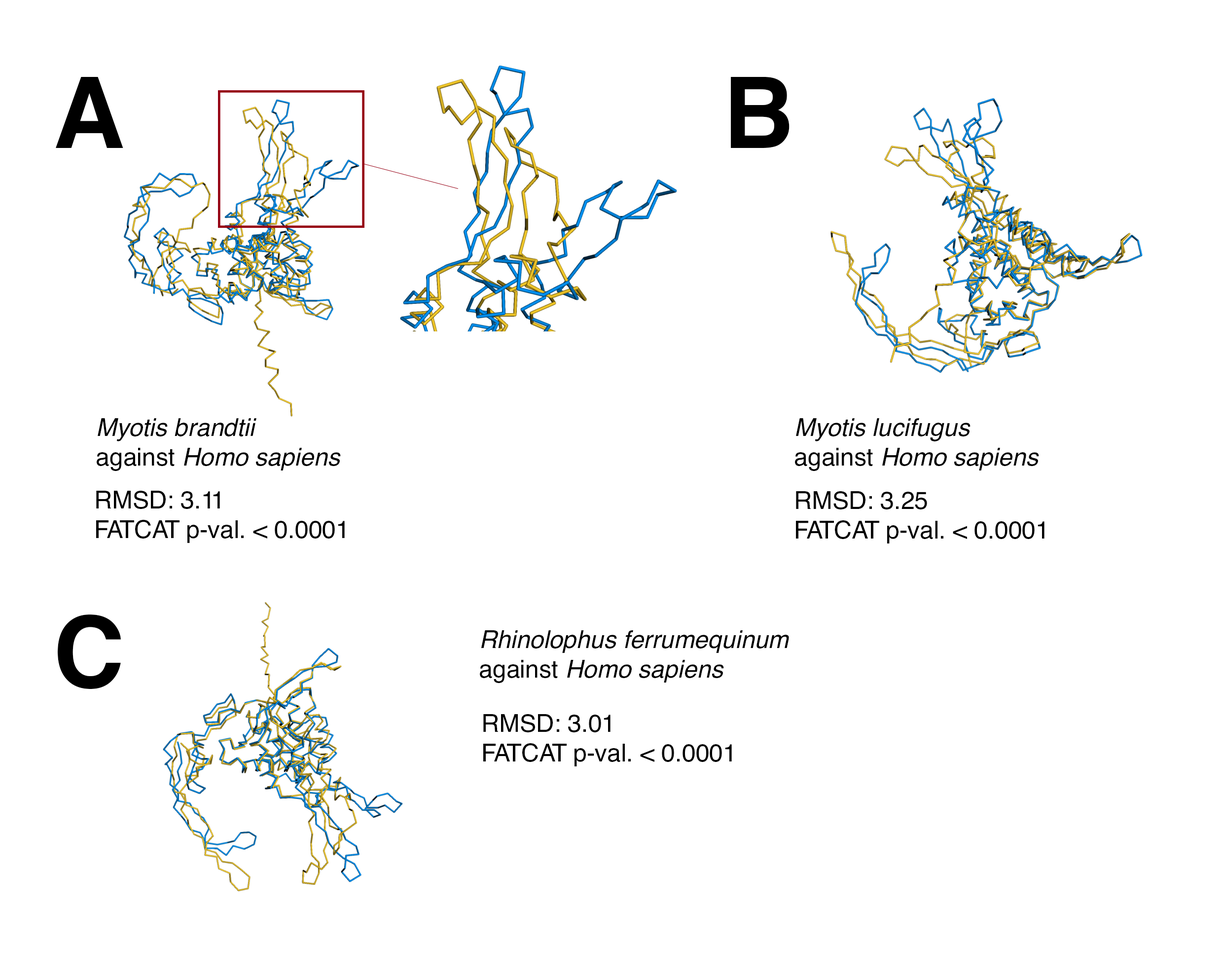
<style>
.page{position:relative;width:1223px;height:975px;background:#ffffff}
.page>*{position:absolute;margin:0}
.t1{font:98.6px "Helvetica-Bold";color:#000000}
.t2{font:24.7px "Helvetica-Oblique";color:#000000}
.t3{font:24.7px "Helvetica-Regular";color:#000000}
.t4{font:5.9px "Helvetica-Regular";color:#000000}
</style>
<div class="page">
<p class="t1" style="left:56px;top:77px;width:67px;height:71px">A</p>
<p class="t1" style="left:731px;top:77px;width:59px;height:71px">B</p>
<p class="t2" style="left:97px;top:418px;width:244px;height:53px">Myotis brandtii<br><span class="t3">against </span>Homo sapiens</p>
<p class="t2" style="left:795px;top:418px;width:244px;height:53px">Myotis lucifugus<br><span class="t3">against </span>Homo sapiens</p>
<p class="t4" style="left:96px;top:491px;width:249px;height:52px">RMSD: 3.11<br>FATCAT p-val. &lt; 0.0001</p>
<p class="t4" style="left:796px;top:491px;width:249px;height:52px">RMSD: 3.25<br>FATCAT p-val. &lt; 0.0001</p>
<p class="t1" style="left:58px;top:614px;width:63px;height:75px">C</p>
<p class="t2" style="left:480px;top:630px;width:309px;height:53px">Rhinolophus ferrumequinum<br><span class="t3">against </span>Homo sapiens</p>
<p class="t4" style="left:483px;top:714px;width:249px;height:52px">RMSD: 3.01<br>FATCAT p-val. &lt; 0.0001</p>
</div>
